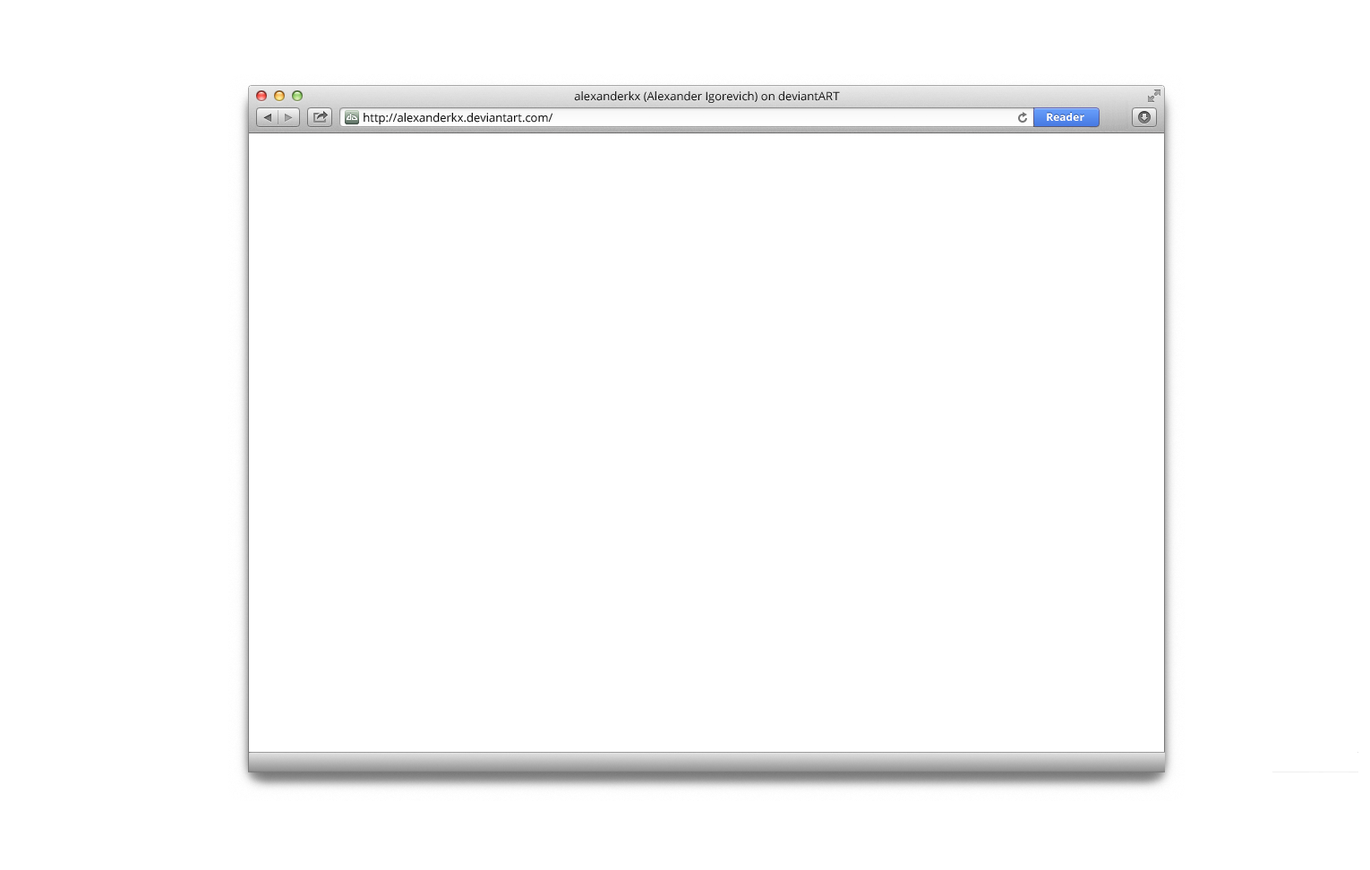
<style>
.page{position:relative;width:1370px;height:870px;background:#ffffff}
.page>*{position:absolute;margin:0}
.t1{font:11.6px "OpenSans";color:#0e0e0e}
</style>
<div class="page">
<p class="t1" style="left:574px;top:91px;width:266px;height:12px">alexanderkx (Alexander Igorevich) on deviantART</p>
<p class="t1" style="left:364px;top:113px;width:188px;height:11px">http://alexanderkx.deviantart.com/</p>
</div>
